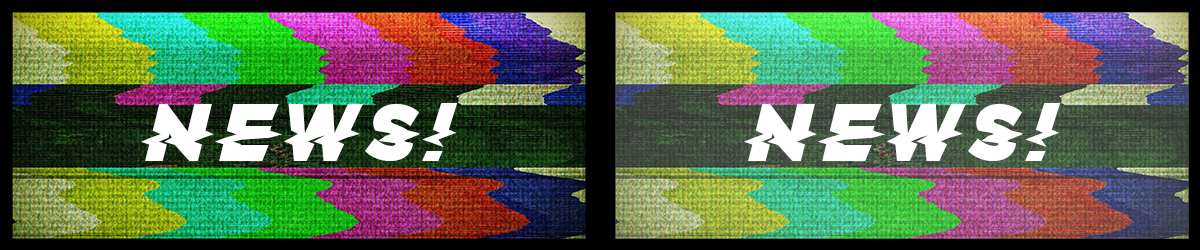
<style>
.page{position:relative;width:1200px;height:250px}
.page>*{position:absolute;margin:0}
.t1{font:110px "PhelixBoomgartner-Regular";color:#ffffff}
</style>
<div class="page">
<p class="t1" style="left:744px;top:103px;width:317px;height:58px">NEWS!</p>
</div>
